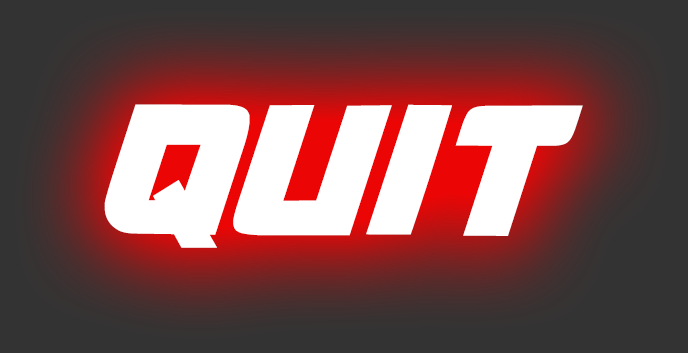
<style>
.page{position:relative;width:688px;height:353px}
.page>*{position:absolute;margin:0}
.t1{font:195.3px "STAR7";letter-spacing:-0.001em;color:#ffffff}
</style>
<div class="page">
<p class="t1" style="left:104px;top:104px;width:479px;height:144px">quit</p>
</div>
